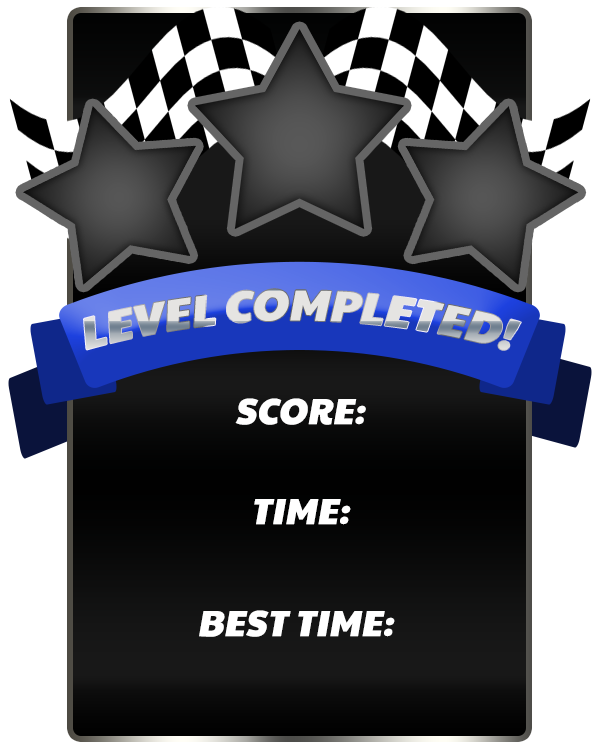
<style>
.page{position:relative;width:600px;height:750px;background:#ffffff}
.page>*{position:absolute;margin:0}
.t1{font:44.2px "PaytoneOne";font-style:italic}
.t2{font:36.3px "PaytoneOne";color:#ffffff;font-style:italic}
</style>
<div class="page">
<p class="t1" style="left:84px;top:289px;width:437px;height:61px">LEVEL COMPLETED!</p>
<p class="t2" style="left:235px;top:398px;width:131px;height:27px">SCORE:</p>
<p class="t2" style="left:254px;top:499px;width:97px;height:26px">TIME:</p>
<p class="t2" style="left:199px;top:610px;width:196px;height:27px">BEST TIME:</p>
</div>
